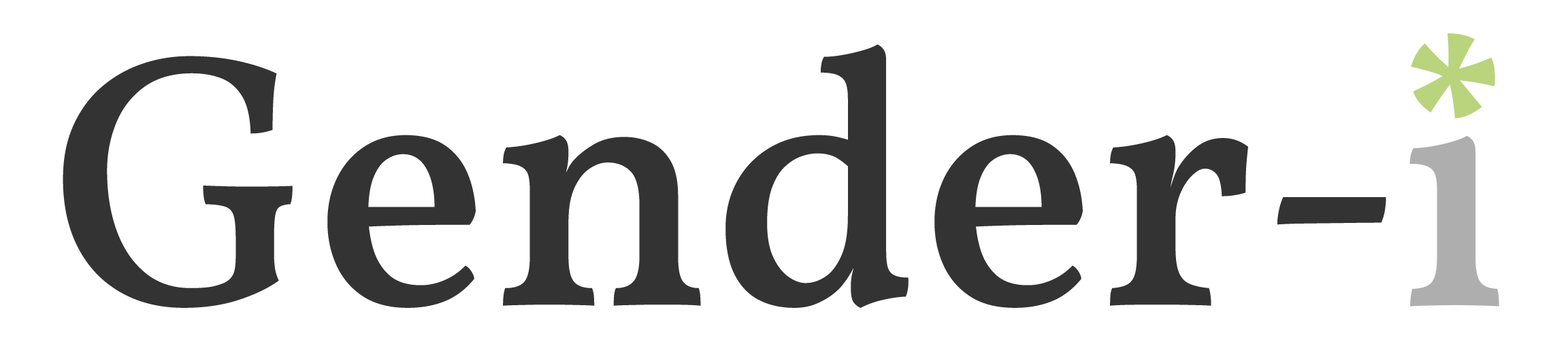
<style>
.page{position:relative;width:1568px;height:348px;background:#ffffff}
.page>*{position:absolute;margin:0}
.t1{font:363px "Vollkorn-Medium";color:#333333}
</style>
<div class="page">
<p class="t1" style="left:63px;top:44px;width:1323px;height:264px">Gender-</p>
</div>
